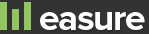
<style>
.page{position:relative;width:149px;height:34px;background:#333333}
.page>*{position:absolute;margin:0}
.t1{font:37px "ProximaNova-Bold";letter-spacing:-0.04em;color:#ffffff}
</style>
<div class="page">
<p class="t1" style="left:40px;top:12px;width:105px;height:18px">easure</p>
</div>
